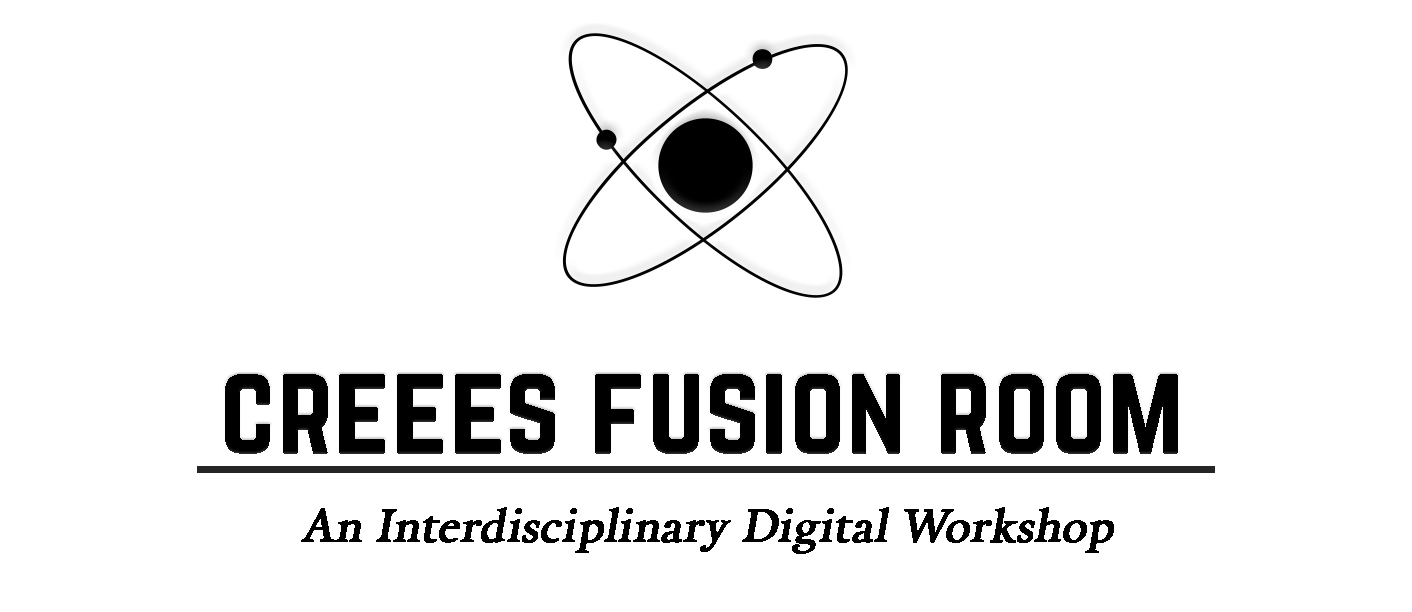
<style>
.page{position:relative;width:1412px;height:612px;background:#ffffff}
.page>*{position:absolute;margin:0}
.t1{font:114.1px "Norwester-Regular";color:#000000}
.t2{font:45.7px "Calendas-Plus";color:#000000;font-weight:bold;font-style:italic}
</style>
<div class="page">
<p class="t1" style="left:225px;top:374px;width:953px;height:80px">creees fusion room</p>
<p class="t2" style="left:301px;top:507px;width:813px;height:47px">An Interdisciplinary Digital Workshop</p>
</div>
